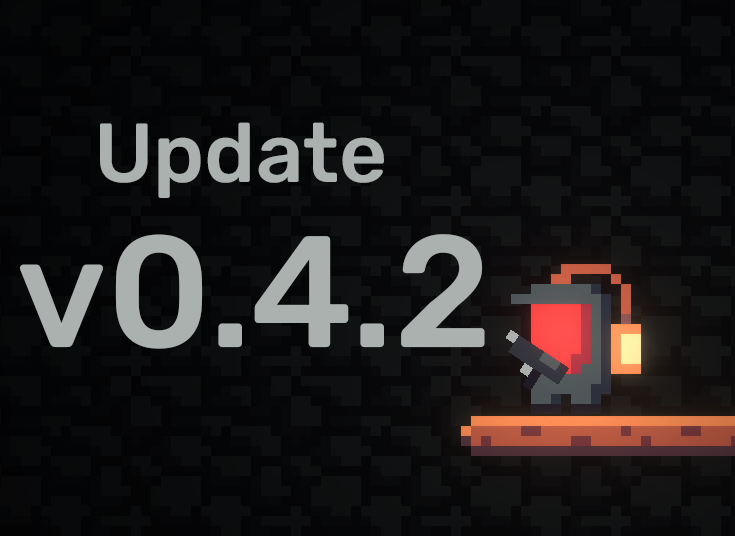
<style>
.page{position:relative;width:735px;height:536px}
.page>*{position:absolute;margin:0}
.t1{font:83.6px "Rubik-Medium";color:#abb1af}
.t2{font:158.3px "Rubik-Medium";color:#abb1af}
</style>
<div class="page">
<p class="t1" style="left:100px;top:122px;width:284px;height:76px">Update</p>
<p class="t2" style="left:19px;top:234px;width:466px;height:115px">v0.4.2</p>
</div>
